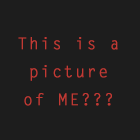
<style>
.page{position:relative;width:140px;height:140px;background:#1d1d1d}
.page>*{position:absolute;margin:0}
.t1{font:16px/28px "LetterGothicMTStd";letter-spacing:0.095em;color:#c23a34;font-weight:bold}
</style>
<div class="page">
<p class="t1" style="left:18px;top:37px;width:100px;height:69px;text-align:center">This is a picture of ME???</p>
</div>
